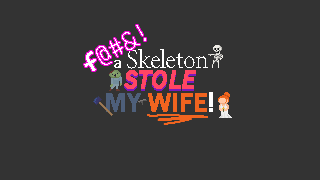
<style>
.page{position:relative;width:320px;height:180px;background:#333333}
.page>*{position:absolute;margin:0}
.t1{font:25.9px "CascadiaCodeRoman-ExtraLight";letter-spacing:-0.02em;color:#ffffff;font-weight:bold}
.t2{font:25.9px "CascadiaCodeRoman-Bold";letter-spacing:-0.02em;color:#ffffff;font-weight:bold}
.t3{font:27px/21px "MinionConceptRoman-Display";letter-spacing:-0.02em;color:#ffffff;font-weight:bold}
.t4{font:15px/21px "ArialMT";letter-spacing:-0.02em;color:#ffffff;font-weight:bold}
.t5{font:27px/20px "FranklinGothic-MediumItalic";letter-spacing:-0.02em;color:#ff4564;font-weight:bold}
.t6{font:27px/23px "FranklinGothic-Medium";letter-spacing:-0.02em;color:#4e5f7a;font-weight:bold}
.t7{font:27px/23px "FranklinGothic-Medium";letter-spacing:-0.02em;color:#f1641f;font-weight:bold}
.t8{font:27px/23px "FranklinGothic-Medium";letter-spacing:-0.02em;color:#ffffff;font-weight:bold}
.t9{font:15px "ArialMT";letter-spacing:-0.02em;color:#ffffff;font-weight:bold}
.t10{font:27px "FranklinGothic-MediumItalic";letter-spacing:-0.02em;color:#ff4564;font-weight:bold}
</style>
<div class="page">
<p class="t1" style="left:84px;top:25px;width:62px;height:46px;rotate:-30deg"><span class="t2">f</span>@#&amp;!</p>
<p class="t3" style="left:106px;top:49px;width:107px;height:63px;text-align:center"><span class="t4">   </span>Skeleton<br><span class="t5">STOLE<br></span><span class="t6">MY </span><span class="t7">WIFE</span><span class="t8">!</span></p>
<p class="t9" style="left:114px;top:60px;width:7px;height:8px">a</p>
<p class="t10" style="left:124px;top:72px;width:72px;height:19px">STOLE</p>
</div>
